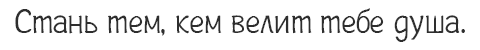
<style>
.page{position:relative;width:480px;height:50px;background:#ffffff}
.page>*{position:absolute;margin:0}
.t1{font:35px "Plainot";color:#2e2e2e}
</style>
<div class="page">
<p class="t1" style="left:15px;top:8px;width:450px;height:34px">Стань тем, кем велит тебе душа.</p>
</div>
